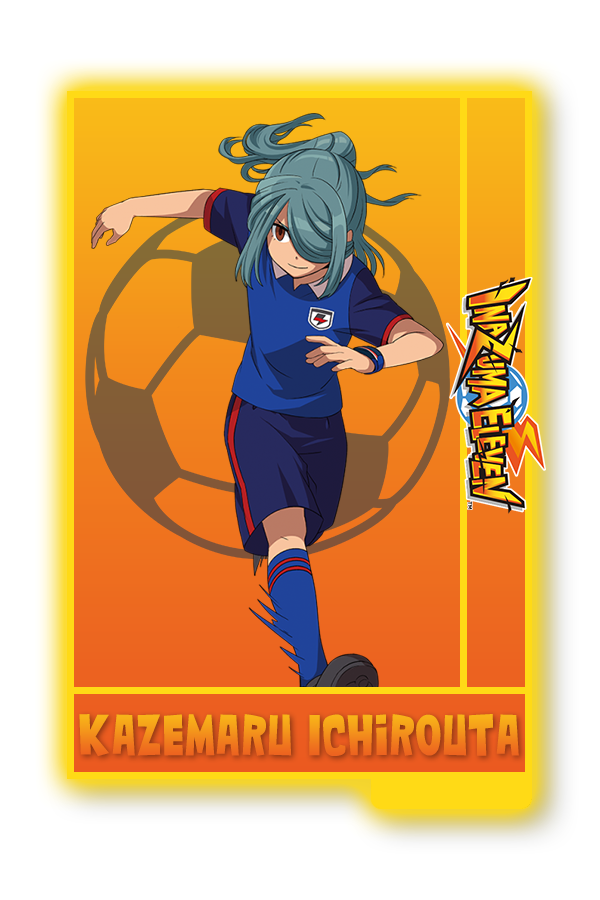
<style>
.page{position:relative;width:600px;height:900px;background:#ffffff}
.page>*{position:absolute;margin:0}
.t1{font:60.3px "TTG-Bold"}
</style>
<div class="page">
<p class="t1" style="left:79px;top:714px;width:440px;height:43px">Kazemaru Ichirouta</p>
</div>
